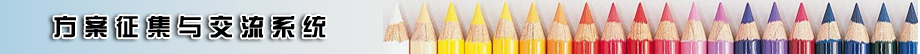
<style>
.page{position:relative;width:920px;height:54px}
.page>*{position:absolute;margin:0}
.t1{font:24px "FZZYJW--GB1-0";letter-spacing:0.3em;color:#000000}
</style>
<div class="page">
<p class="t1" style="left:54px;top:15px;width:272px;height:23px">方案征集与交流系统</p>
</div>
